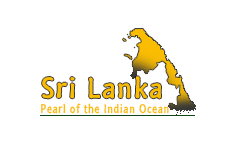
<style>
.page{position:relative;width:250px;height:150px;background:#ffffff}
.page>*{position:absolute;margin:0}
.t1{font:29.1px "SegoeMarker";letter-spacing:0.05em;color:#fabd02;scale:1.14 1}
.t2{font:12.5px "SegoeMarker";letter-spacing:0.05em;color:#fabd02}
</style>
<div class="page">
<p class="t1" style="left:42px;top:76px;width:119px;height:23px">Sri Lanka</p>
<p class="t2" style="left:40px;top:103px;width:129px;height:11px">Pearl of the Indian Ocean</p>
</div>
